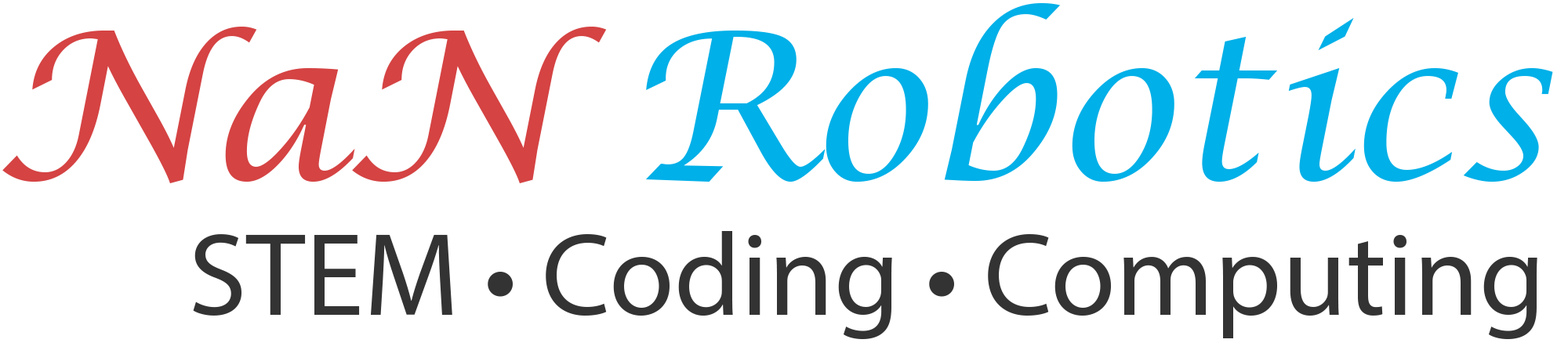
<style>
.page{position:relative;width:1568px;height:343px;background:#ffffff}
.page>*{position:absolute;margin:0}
.t1{font:206.2px "LucidaCalligraphy-Italic";color:#00b0e8}
.t2{font:206.2px "LucidaCalligraphy-Italic";color:#d54343}
.t3{font:118.3px "TimesNewRomanPSMT";color:#333333}
</style>
<div class="page">
<p class="t1" style="left:2px;top:3px;width:1551px;height:180px"><span class="t2">NaN </span>Robotics</p>
<p class="t3" style="left:193px;top:231px;width:1344px;height:109px">STEM • Coding • Computing</p>
</div>
